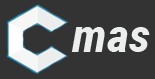
<style>
.page{position:relative;width:155px;height:79px;background:#333333}
.page>*{position:absolute;margin:0}
.t1{font:48.2px "RobotoCondensed-BoldItalic";color:#eceded}
</style>
<div class="page">
<p class="t1" style="left:71px;top:27px;width:79px;height:25px">mas</p>
</div>
